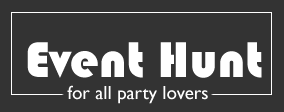
<style>
.page{position:relative;width:284px;height:112px;background:#333333}
.page>*{position:absolute;margin:0}
.t1{font:52px "Bauhaus93";color:#ffffff}
.t2{font:19px "GillSansMT";color:#ffffff}
</style>
<div class="page">
<p class="t1" style="left:27px;top:42px;width:235px;height:36px">Event Hunt</p>
<p class="t2" style="left:67px;top:85px;width:141px;height:19px">for all party lovers</p>
</div>
